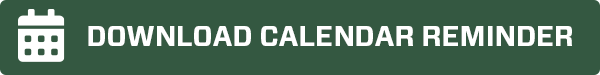
<style>
.page{position:relative;width:600px;height:75px;background:#345841}
.page>*{position:absolute;margin:0}
.t1{font:28px "Forza-Bold";color:#ffffff;text-transform:uppercase}
</style>
<div class="page">
<p class="t1" style="left:88px;top:26px;width:484px;height:20px">Download Calendar Reminder</p>
</div>
